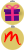
<style>
.page{position:relative;width:25px;height:50px;background:#ffffff}
.page>*{position:absolute;margin:0}
.t1{font:36px "RugeBoogie-Regular";color:#ff0000}
</style>
<div class="page">
<p class="t1" style="left:4px;top:31px;width:18px;height:14px">m</p>
</div>
